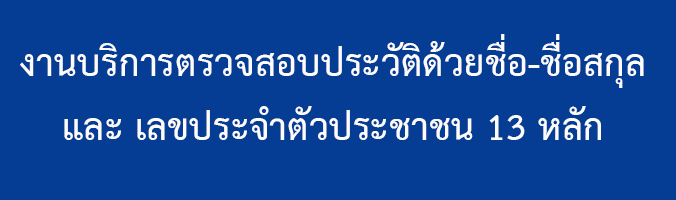
<style>
.page{position:relative;width:676px;height:200px;background:#053d94}
.page>*{position:absolute;margin:0}
.t1{font:53.3px "THSarabunPSK-Bold";color:#fcfcfc}
</style>
<div class="page">
<p class="t1" style="left:20px;top:34px;width:624px;height:106px;text-align:center">งานบริการตรวจสอบประวัติด้วยชื่อ-ชื่อสกุล<br>และ เลขประจำตัวประชาชน 13 หลัก</p>
</div>
